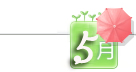
<style>
.page{position:relative;width:136px;height:72px;background:#ffffff}
.page>*{position:absolute;margin:0}
.t1{font:48px "GBHerSin-Medium";color:#fbf6f5;font-weight:bold}
</style>
<div class="page">
<p class="t1" style="left:73px;top:30px;width:26px;height:35px">5</p>
</div>
